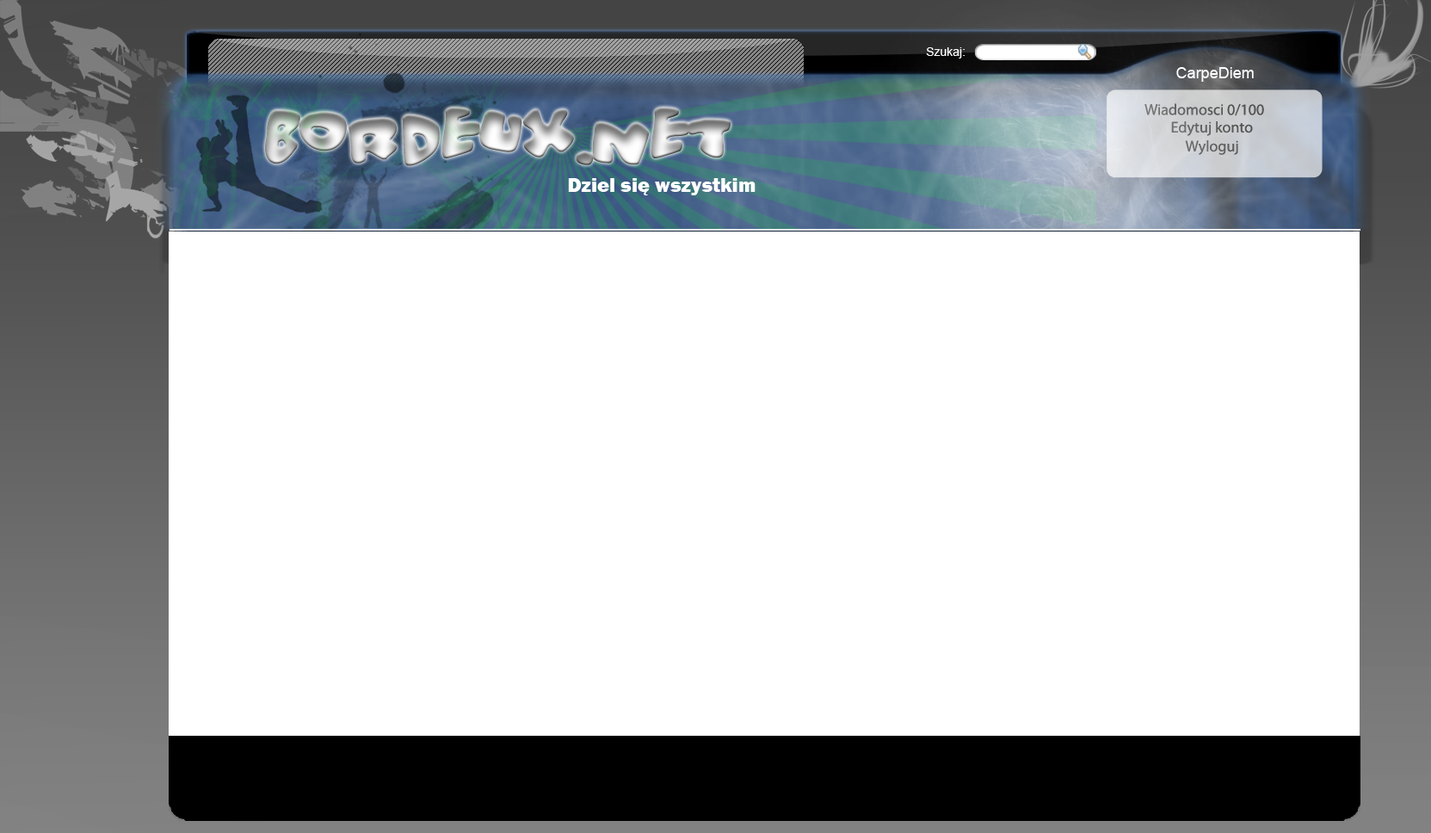
<style>
.page{position:relative;width:1431px;height:833px;background:#ffffff}
.page>*{position:absolute;margin:0}
.t1{font:12px "ArialMT";color:#ffffff}
.t2{font:15.5px "ArialMT";color:#ffffff}
.t3{font:62px "Vitamin"}
.t4{font:15.5px "MyriadPro-Regular";color:#515151}
.t5{font:20.7px "FranklinGothic-Heavy";color:#ffffff}
</style>
<div class="page">
<p class="t1" style="left:926px;top:47px;width:39px;height:12px">Szukaj:</p>
<p class="t2" style="left:1177px;top:67px;width:77px;height:15px">CarpeDiem</p>
<p class="t3" style="left:265px;top:107px;width:467px;height:59px">Bordeux.NET</p>
<p class="t4" style="left:1145px;top:103px;width:119px;height:13px">Wiadomosci 0/100</p>
<p class="t4" style="left:1171px;top:121px;width:82px;height:15px">Edytuj konto</p>
<p class="t4" style="left:1185px;top:140px;width:53px;height:15px">Wyloguj</p>
<p class="t5" style="left:568px;top:178px;width:188px;height:17px">Dziel się wszystkim</p>
</div>
